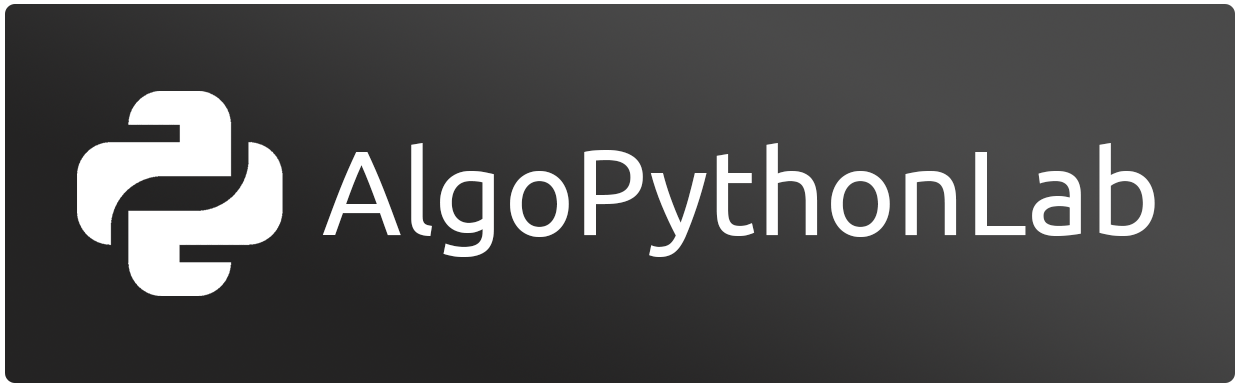
<style>
.page{position:relative;width:1239px;height:387px}
.page>*{position:absolute;margin:0}
.t1{font:120px "Ubuntu-Regular";color:#ffffff}
</style>
<div class="page">
<p class="t1" style="left:322px;top:143px;width:833px;height:114px">AlgoPythonLab</p>
</div>
